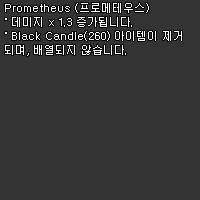
<style>
.page{position:relative;width:200px;height:200px;background:#333333}
.page>*{position:absolute;margin:0}
.t1{font:11px/14px "Dotum";color:#ffffff}
</style>
<div class="page">
<p class="t1" style="left:5px;top:3px;width:177px;height:53px">Prometheus (프로메테우스)<br>˚ 데미지 x 1.3 증가됩니다.<br>˚ Black Candle(260) 아이템이 제거<br>되며, 배열되지 않습니다.</p>
</div>
